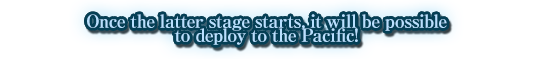
<style>
.page{position:relative;width:534px;height:59px;background:#ffffff}
.page>*{position:absolute;margin:0}
.t1{font:18px/14px "RyuminPro-ExBold";letter-spacing:-0.04em;color:#b9e0ff}
</style>
<div class="page">
<p class="t1" style="left:87px;top:14px;width:360px;height:31px;text-align:center">Once the latter stage starts, it will be possible<br>to deploy to the Pacific!</p>
</div>
